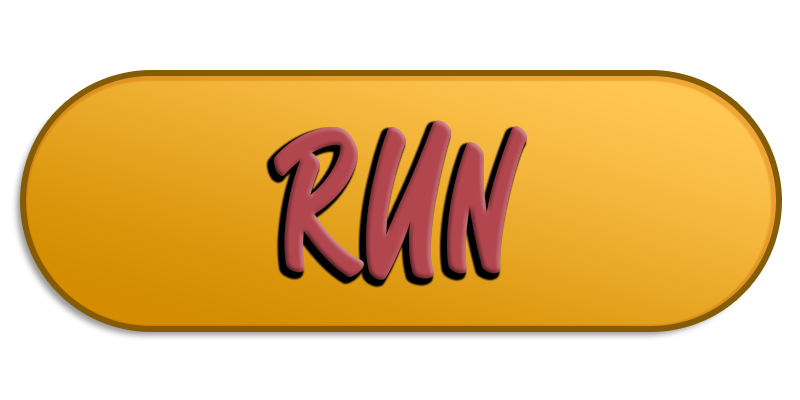
<style>
.page{position:relative;width:800px;height:400px;background:#ffffff}
.page>*{position:absolute;margin:0}
.t1{font:208.3px "EightiesFREE";color:#b1464e}
</style>
<div class="page">
<p class="t1" style="left:273px;top:120px;width:255px;height:160px">RUN</p>
</div>
